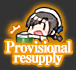
<style>
.page{position:relative;width:76px;height:70px;background:#333333}
.page>*{position:absolute;margin:0}
.t1{font:15px/10px "RyuminPro-ExBold";letter-spacing:-0.08em;color:#ffffff;font-weight:bold;scale:0.9 1}
</style>
<div class="page">
<p class="t1" style="left:5px;top:41px;width:67px;height:24px;text-align:center">Provisional<br>resupply</p>
</div>
